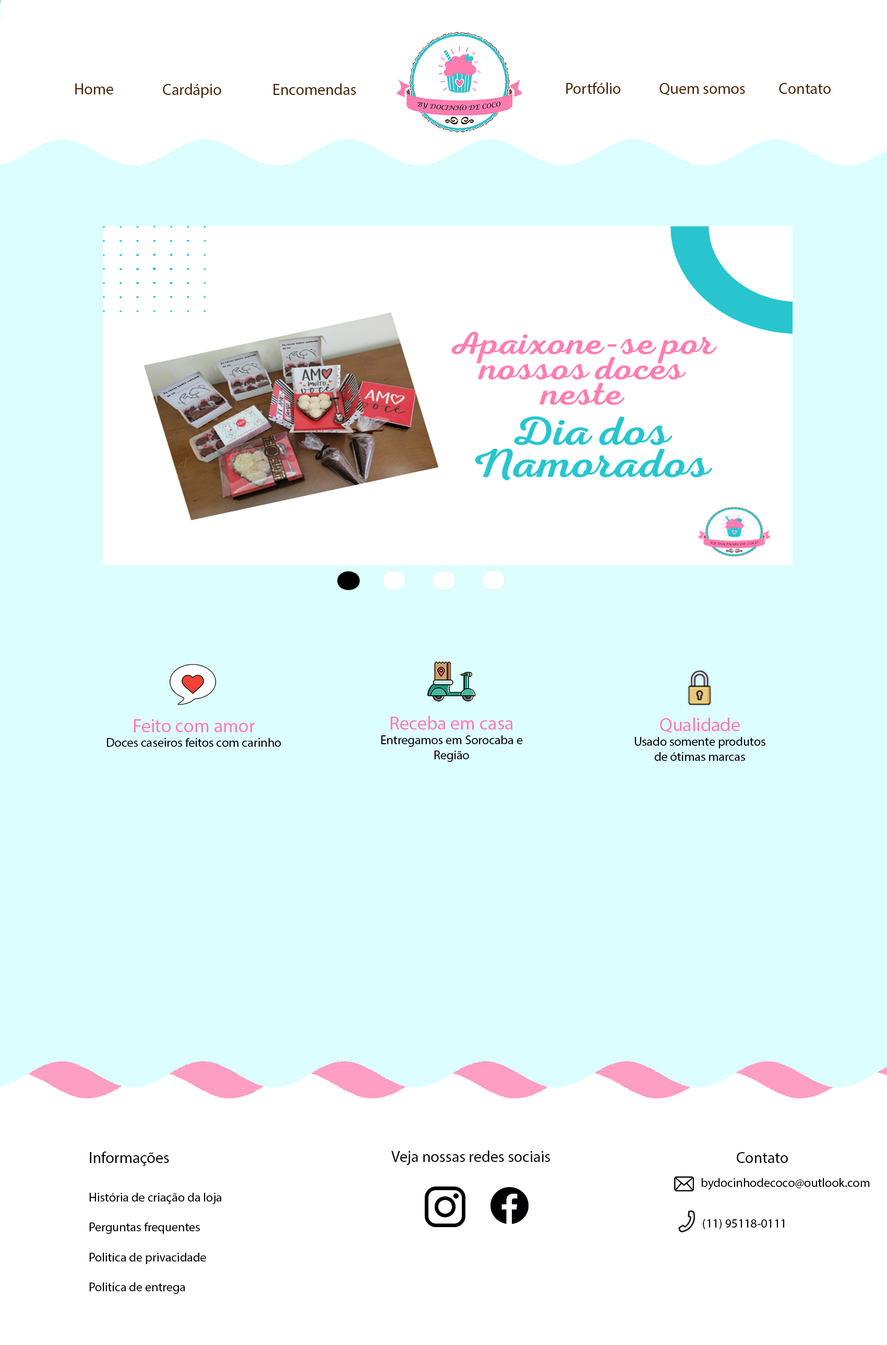
<style>
.page{position:relative;width:887px;height:1345px;background:#dcfeff}
.page>*{position:absolute;margin:0}
.t1{font:15.6px "MyriadPro-Regular";color:#4a2302}
.t2{font:12.5px "MyriadPro-Regular";color:#000000}
.t3{font:18.8px "MyriadPro-Regular";color:#fd7dae}
.t4{font:18.8px "MyriadPro-Regular";color:#ff7cae}
.t5{font:15.6px "MyriadPro-Regular";color:#000000}
</style>
<div class="page">
<p class="t1" style="left:75px;top:83px;width:38px;height:11px">Home</p>
<p class="t1" style="left:163px;top:83px;width:58px;height:15px">Cardápio</p>
<p class="t1" style="left:273px;top:83px;width:83px;height:12px">Encomendas</p>
<p class="t1" style="left:566px;top:82px;width:54px;height:12px">Portfólio</p>
<p class="t1" style="left:659px;top:83px;width:86px;height:12px">Quem somos</p>
<p class="t1" style="left:779px;top:83px;width:51px;height:11px">Contato</p>
<p class="t2" style="left:107px;top:719px;width:174px;height:28px;text-align:center"><span class="t3">Feito com amor<br></span>Doces caseiros feitos com carinho</p>
<p class="t2" style="left:381px;top:716px;width:142px;height:46px;text-align:center"><span class="t4">Receba em casa<br></span>Entregamos em Sorocaba e Região</p>
<p class="t2" style="left:634px;top:718px;width:131px;height:43px;text-align:center"><span class="t3">Qualidade<br></span>Usado somente produtos <br>de ótimas marcas</p>
<p class="t5" style="left:90px;top:1152px;width:79px;height:14px">Informações</p>
<p class="t5" style="left:391px;top:1150px;width:159px;height:15px">Veja nossas redes sociais</p>
<p class="t5" style="left:736px;top:1152px;width:51px;height:11px">Contato</p>
<p class="t2" style="left:701px;top:1178px;width:168px;height:12px">bydocinhodecoco@outlook.com</p>
<p class="t2" style="left:89px;top:1193px;width:133px;height:101px">História de criação da loja<br><br>Perguntas frequentes<br><br>Politica de privacidade<br><br>Politica de entrega</p>
<p class="t2" style="left:702px;top:1219px;width:82px;height:10px">(11) 95118-0111</p>
</div>
